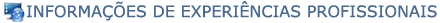
<style>
.page{position:relative;width:440px;height:23px;background:#ffffff}
.page>*{position:absolute;margin:0}
.t1{font:16px "Verdana";color:#49698d}
</style>
<div class="page">
<p class="t1" style="left:27px;top:1px;width:410px;height:20px">INFORMAÇÕES DE EXPERIÊNCIAS PROFISSIONAIS</p>
</div>
